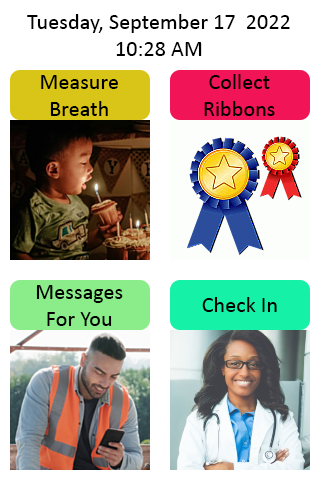
<style>
.page{position:relative;width:320px;height:480px;background:#ffffff}
.page>*{position:absolute;margin:0}
.t1{font:22.2px "Calibri";color:#000000}
</style>
<div class="page">
<p class="t1" style="left:27px;top:14px;width:263px;height:42px;text-align:center">Tuesday, September 17  2022<br>10:28 AM</p>
<p class="t1" style="left:41px;top:75px;width:77px;height:41px;text-align:center">Measure<br>Breath</p>
<p class="t1" style="left:204px;top:74px;width:71px;height:42px;text-align:center">Collect<br>Ribbons</p>
<p class="t1" style="left:36px;top:285px;width:87px;height:41px;text-align:center">Messages<br>For You</p>
<p class="t1" style="left:202px;top:297px;width:75px;height:15px">Check In</p>
</div>
